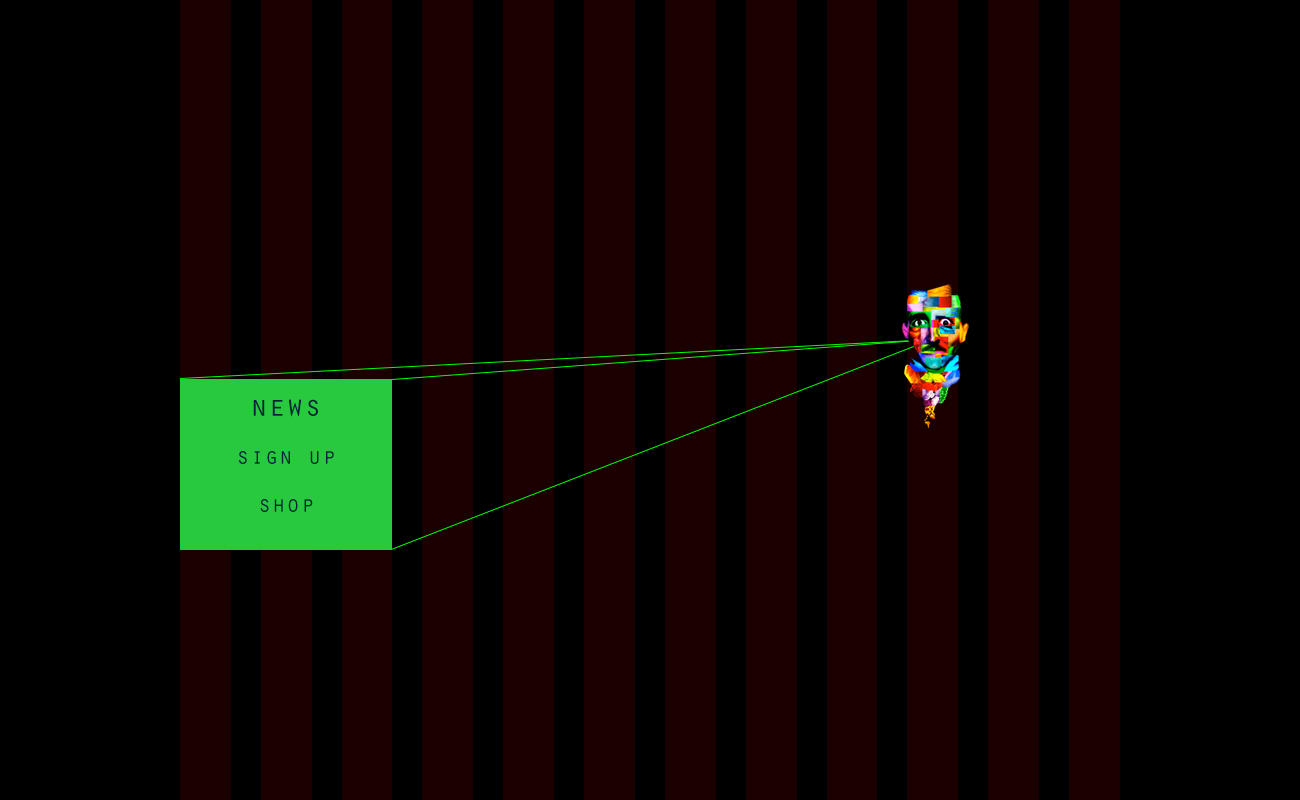
<style>
.page{position:relative;width:1300px;height:800px;background:#000000}
.page>*{position:absolute;margin:0}
.t1{font:24px/24px "OratorStd";color:#002035}
.t2{font:30px/24px "OratorStd";color:#002035}
</style>
<div class="page">
<p class="t1" style="left:238px;top:399px;width:96px;height:113px;text-align:center"><span class="t2">news<br><br></span>sign up<br><br>shop</p>
</div>
